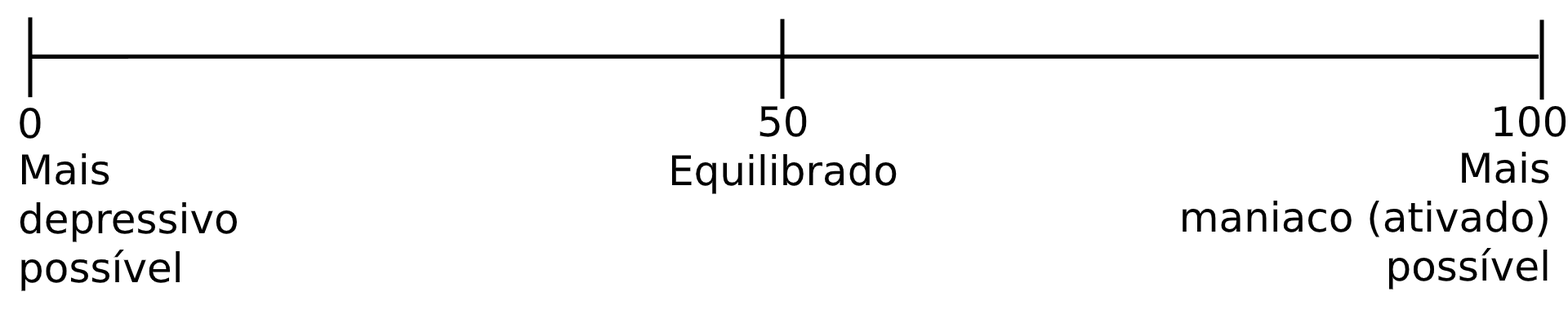
<style>
.page{position:relative;width:1568px;height:314px;background:#ffffff}
.page>*{position:absolute;margin:0}
.t1{font:40.8px "DejaVuSans";color:#000000}
</style>
<div class="page">
<p class="t1" style="left:20px;top:107px;width:21px;height:32px">0</p>
<p class="t1" style="left:760px;top:105px;width:47px;height:32px">50</p>
<p class="t1" style="left:1494px;top:105px;width:72px;height:32px">100</p>
<p class="t1" style="left:20px;top:154px;width:217px;height:138px">Mais <br>depressivo <br>possível</p>
<p class="t1" style="left:671px;top:154px;width:226px;height:40px">Equilibrado</p>
<p class="t1" style="left:1183px;top:152px;width:366px;height:138px;text-align:right">Mais<br>maniaco (ativado)<br>possível</p>
</div>
